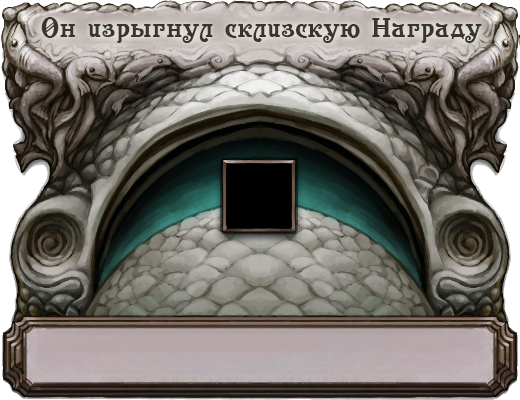
<style>
.page{position:relative;width:520px;height:400px}
.page>*{position:absolute;margin:0}
.t1{font:27.7px "Casanova";letter-spacing:0.03em;color:#373433}
</style>
<div class="page">
<p class="t1" style="left:41px;top:17px;width:441px;height:26px">Он изрыгнул склизскую Награду</p>
</div>
